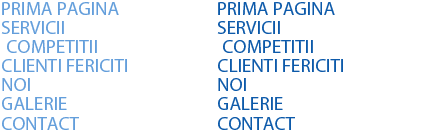
<style>
.page{position:relative;width:432px;height:132px;background:#ffffff}
.page>*{position:absolute;margin:0}
.t1{font:19px "MyriadPro-Regular";color:#639edb}
.t2{font:19px "MyriadPro-Regular";color:#0d5aaa}
</style>
<div class="page">
<p class="t1" style="left:2px;top:2px;width:117px;height:13px">PRIMA PAGINA</p>
<p class="t2" style="left:218px;top:2px;width:117px;height:13px">PRIMA PAGINA</p>
<p class="t1" style="left:1px;top:21px;width:63px;height:13px">SERVICII</p>
<p class="t2" style="left:217px;top:21px;width:63px;height:13px">SERVICII</p>
<p class="t1" style="left:7px;top:40px;width:90px;height:13px">COMPETITII</p>
<p class="t2" style="left:223px;top:40px;width:90px;height:13px">COMPETITII</p>
<p class="t1" style="left:2px;top:59px;width:125px;height:13px">CLIENTI FERICITI</p>
<p class="t2" style="left:218px;top:59px;width:125px;height:13px">CLIENTI FERICITI</p>
<p class="t1" style="left:2px;top:78px;width:28px;height:13px">NOI</p>
<p class="t2" style="left:218px;top:78px;width:28px;height:13px">NOI</p>
<p class="t1" style="left:2px;top:97px;width:65px;height:13px">GALERIE</p>
<p class="t2" style="left:218px;top:97px;width:65px;height:13px">GALERIE</p>
<p class="t1" style="left:2px;top:117px;width:77px;height:13px">CONTACT</p>
<p class="t2" style="left:218px;top:117px;width:77px;height:13px">CONTACT</p>
</div>
